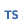
<style>
.page{position:relative;width:24px;height:24px;background:#ffffff}
.page>*{position:absolute;margin:0}
.t1{font:11.8px "DejaVuSans-Bold";color:#3f69ae;scale:0.87 1}
</style>
<div class="page">
<p class="t1" style="left:4px;top:10px;width:14px;height:10px">TS</p>
</div>
